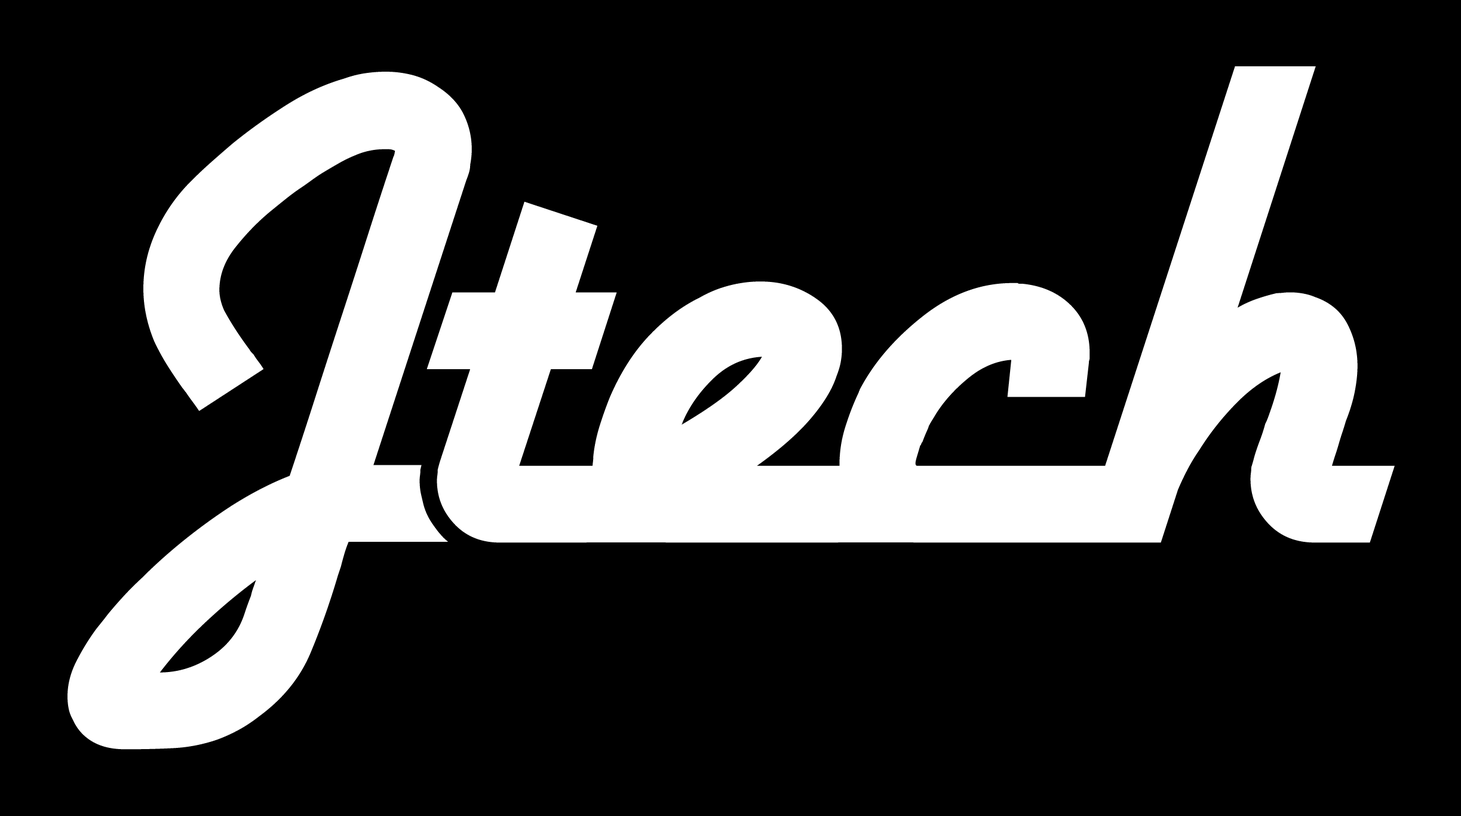
<style>
.page{position:relative;width:1461px;height:816px;background:#000000}
.page>*{position:absolute;margin:0}
.t1{font:774.2px "Airstream";letter-spacing:-0.026em;color:#ffffff}
</style>
<div class="page">
<p class="t1" style="left:68px;top:72px;width:404px;height:678px">J</p>
<p class="t1" style="left:427px;top:66px;width:968px;height:477px">tech</p>
</div>
